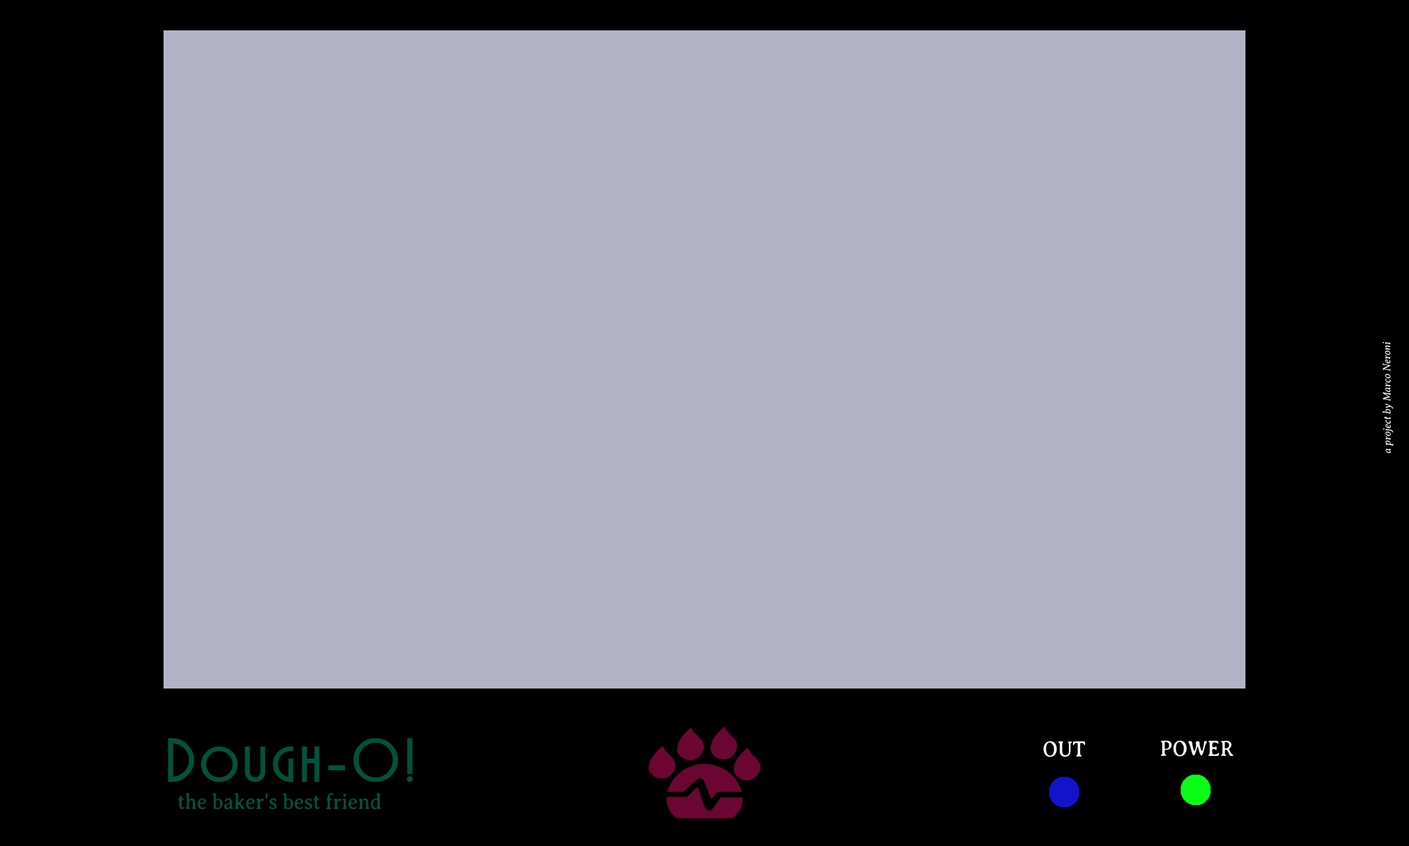
<style>
.page{position:relative;width:1409px;height:846px;background:#b3b3c7}
.page>*{position:absolute;margin:0}
.t1{font:60.8px "MarquisetteBTNBold";letter-spacing:0.075em;color:#01533b}
.t2{font:22.1px "AveriaSerifLibre-Regular";color:#fcfafa;scale:0.91 1}
.t3{font:22.1px "AveriaSerifLibre-Regular";color:#f8f4f4;scale:0.91 1}
.t4{font:22.1px "AveriaSerifLibre-Regular";color:#01533b;scale:0.91 1}
</style>
<div class="page">
<p class="t1" style="left:168px;top:738px;width:245px;height:44px">Dough-O!</p>
<p class="t2" style="left:1043px;top:741px;width:42px;height:16px">OUT</p>
<p class="t3" style="left:1161px;top:741px;width:73px;height:16px">POWER</p>
<p class="t4" style="left:178px;top:793px;width:203px;height:17px">the baker's best friend</p>
</div>
